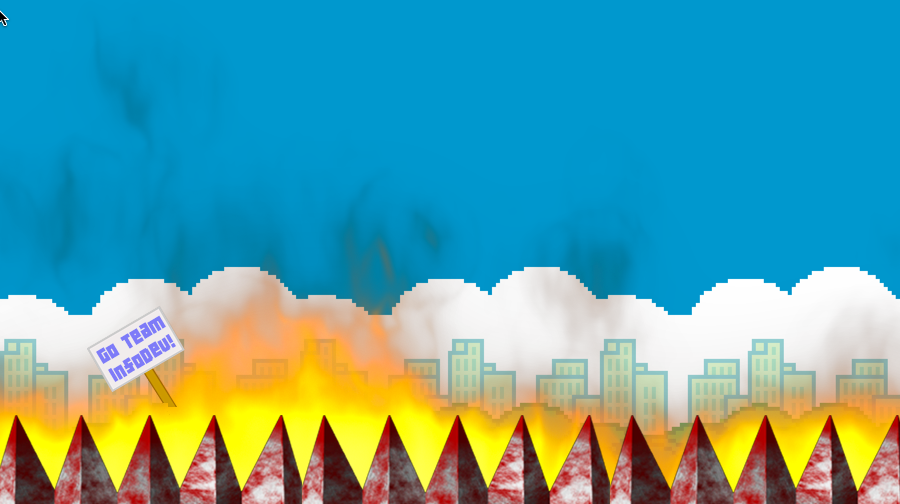
<style>
.page{position:relative;width:900px;height:504px;background:#0098ce}
.page>*{position:absolute;margin:0}
.t1{font:18px "04b19";color:#7e7bf8}
</style>
<div class="page">
<p class="t1" style="left:96px;top:315px;width:80px;height:67px;text-align:center;rotate:-31deg">Go Team<br>InfoDev!</p>
</div>
